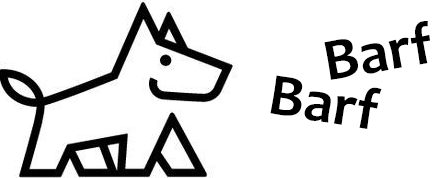
<style>
.page{position:relative;width:448px;height:178px;background:#ffffff}
.page>*{position:absolute;margin:0}
.t1{font:60px "Candara-Bold";color:#000000}
</style>
<div class="page">
<p class="t1" style="left:324px;top:21px;width:106px;height:59px;rotate:-10deg">Barf</p>
<p class="t1" style="left:270px;top:75px;width:112px;height:54px;rotate:9deg">Barf</p>
</div>
